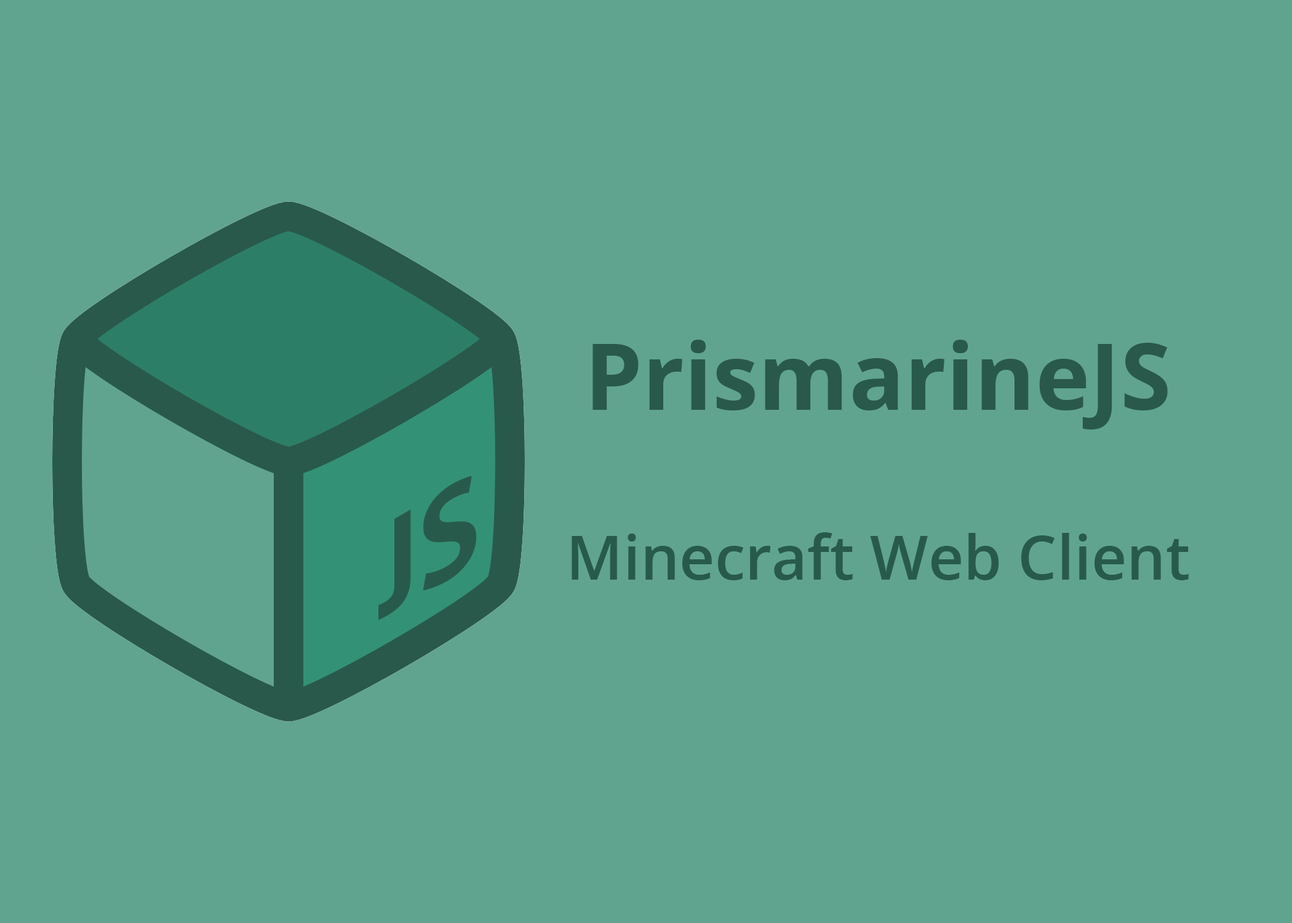
<style>
.page{position:relative;width:1292px;height:923px;background:#60a490}
.page>*{position:absolute;margin:0}
.t1{font:92.3px "OpenSans-Bold";color:#29594b}
.t2{font:61.5px "OpenSans-SemiBold";color:#285a4b}
</style>
<div class="page">
<p class="t1" style="left:592px;top:340px;width:576px;height:89px">PrismarineJS</p>
<p class="t2" style="left:572px;top:532px;width:617px;height:48px">Minecraft Web Client</p>
</div>
